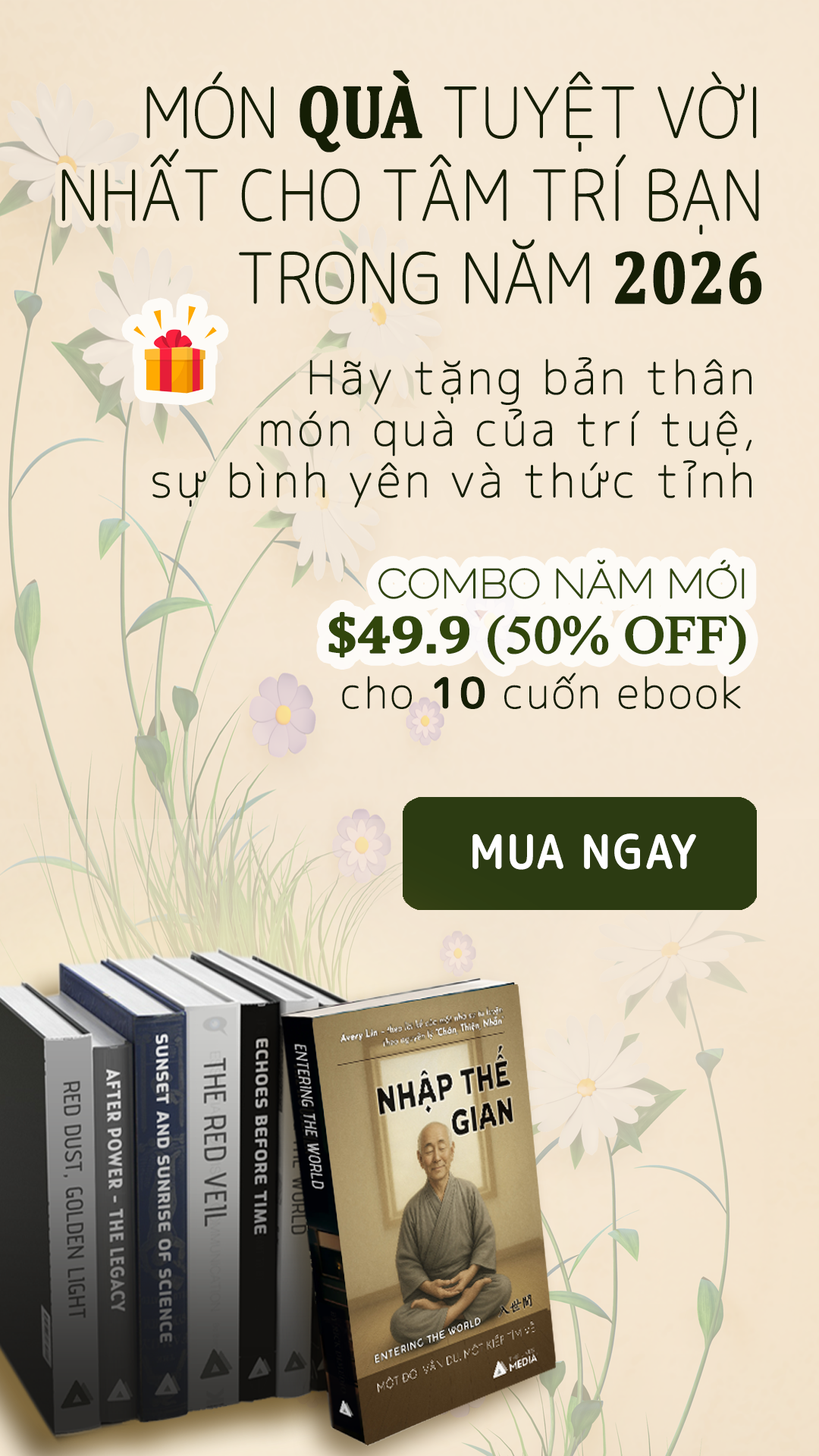
<style>
.page{position:relative;width:819px;height:1456px}
.page>*{position:absolute;margin:0}
.t1{font:68.2px/82.8px "RoundedMplus1c-Thin";color:#151e05;font-weight:bold;scale:0.9 1}
.t2{font:75.1px/82.8px "Cambria-Bold";color:#151e05;font-weight:bold;scale:0.82 1}
.t3{font:45.5px/51.6px "RoundedMplus1c-Thin";letter-spacing:0.075em;color:#151e05;font-weight:bold}
.t4{font:40.9px/54.6px "Raleway-Thin";letter-spacing:-0.025em;color:#31460c;font-weight:bold;scale:1.07 1}
.t5{font:53.2px/54.6px "Cambria-Bold";letter-spacing:-0.025em;color:#31460c;font-weight:bold;scale:1.07 1}
.t6{font:53.2px/54.6px "TimesNewRomanPSMT";letter-spacing:-0.025em;color:#31460c;font-weight:bold;scale:1.07 1}
.t7{font:41.7px "RoundedMplus1c-Thin";letter-spacing:0.05em;color:#151e05;font-weight:bold}
.t8{font:41.7px "RoundedMplus1c-Medium";letter-spacing:0.05em;color:#151e05;font-weight:bold}
.t9{font:45.9px "RoundedMplus1c-Medium";letter-spacing:0.05em;color:#ffffff;font-weight:bold;scale:0.91 1}
</style>
<div class="page">
<p class="t1" style="left:61px;top:70px;width:701px;height:235px;text-align:right">MÓN <span class="t2">QUÀ</span> TUYỆT VỜI NHẤT CHO TÂM TRÍ BẠN TRONG NĂM <span class="t2">2026</span></p>
<p class="t3" style="left:152px;top:357px;width:600px;height:151px;text-align:right">Hãy tặng bản thân <br>món quà của trí tuệ, <br>sự bình yên và thức tỉnh</p>
<p class="t4" style="left:328px;top:560px;width:418px;height:105px;text-align:right">COMBO NĂM MỚI<br> <span class="t5">$49.9</span><span class="t6"> (50% OFF)</span></p>
<p class="t7" style="left:342px;top:673px;width:399px;height:36px">cho <span class="t8">10</span> cuốn ebook</p>
<p class="t9" style="left:472px;top:833px;width:224px;height:37px">MUA NGAY</p>
</div>
